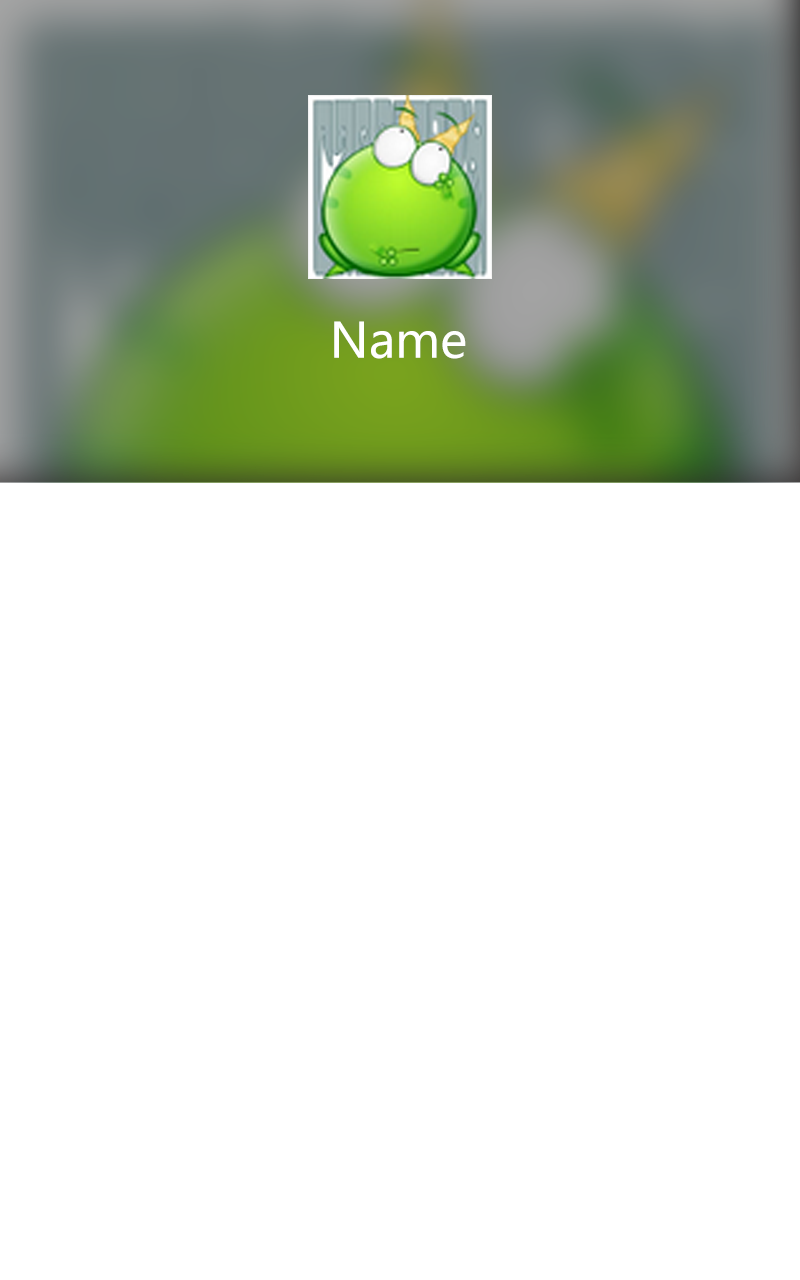
<style>
.page{position:relative;width:800px;height:1280px;background:#ffffff}
.page>*{position:absolute;margin:0}
.t1{font:48px "MicrosoftYaHei";color:#ffffff}
</style>
<div class="page">
<p class="t1" style="left:334px;top:321px;width:132px;height:38px">Name</p>
</div>
